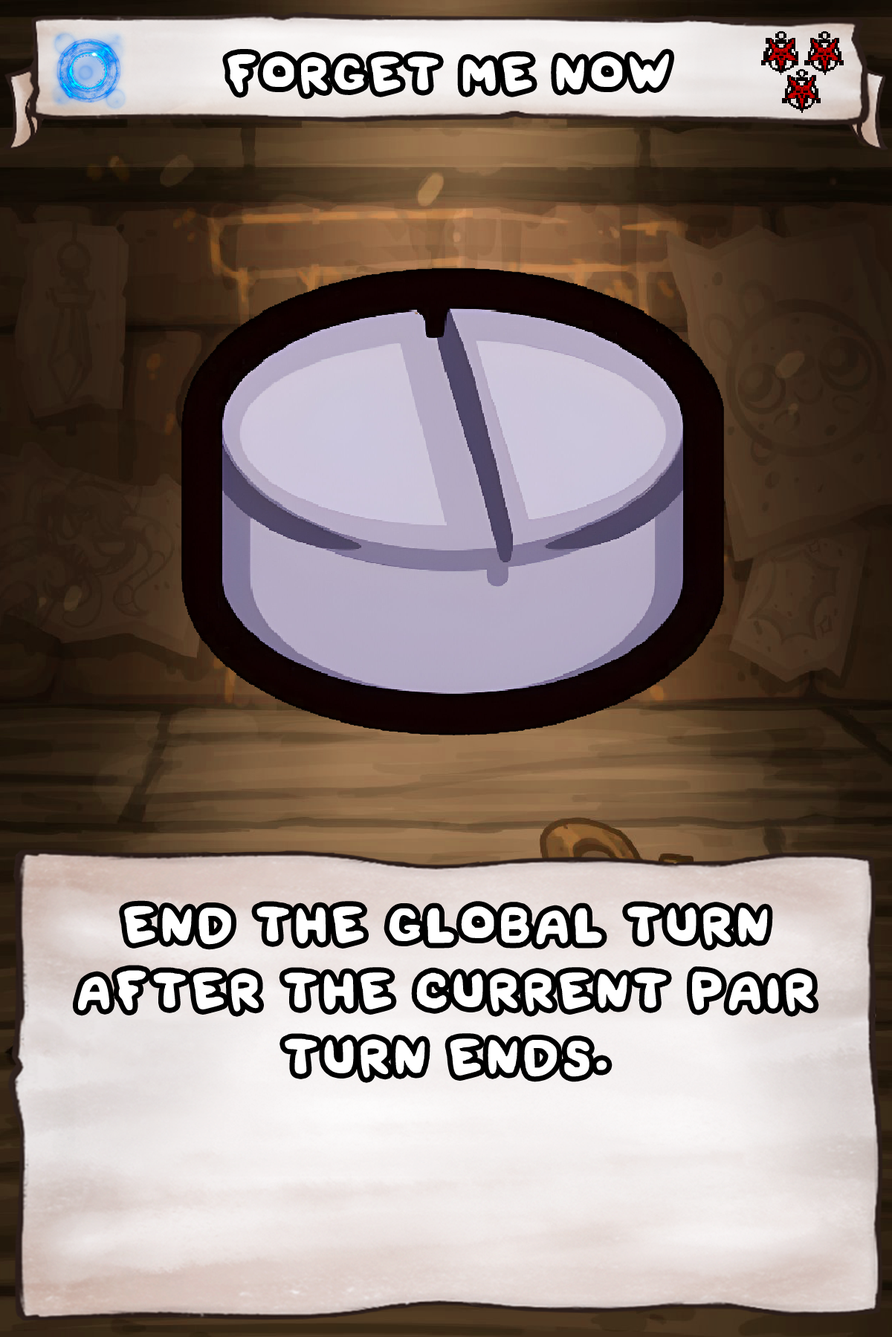
<style>
.page{position:relative;width:892px;height:1337px}
.page>*{position:absolute;margin:0}
.t1{font:118.9px "Font_soulsV2_Body-Regular";color:#ffffff}
.t2{font:124.1px "Font_soulsV2_Body-Regular";color:#ffffff}
</style>
<div class="page">
<p class="t1" style="left:227px;top:53px;width:442px;height:41px">Forget Me Now</p>
<p class="t2" style="left:78px;top:906px;width:736px;height:172px">End the global turn after the current pair turn ends.</p>
</div>
